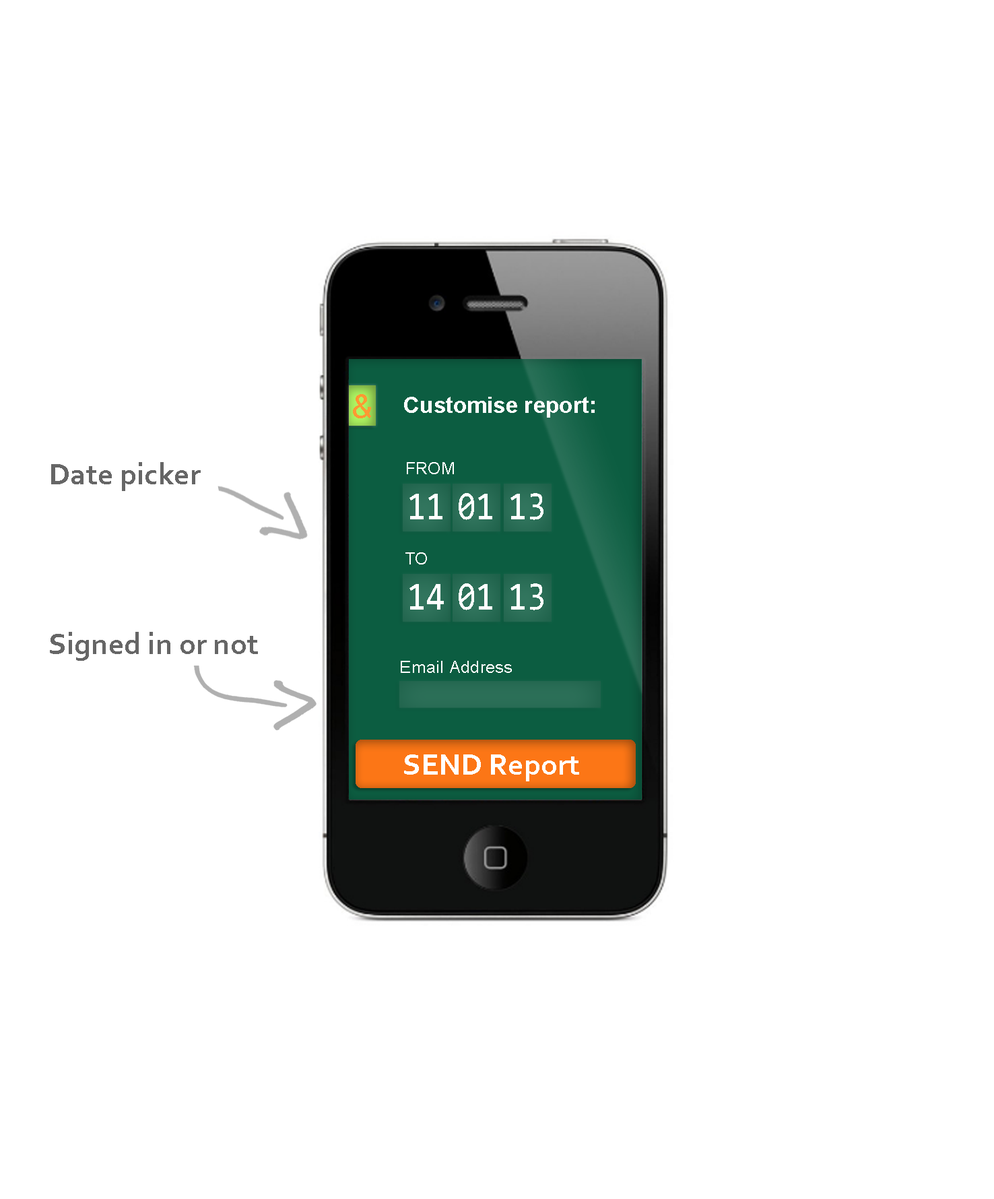
<style>
.page{position:relative;width:994px;height:1199px;background:#ffffff}
.page>*{position:absolute;margin:0}
.t1{font:30.9px "Mangal";color:#ff9933}
.t2{font:22.5px "Arial-BoldMT";letter-spacing:0.01em;color:#ffffff}
.t3{font:30.9px "Corbel-Bold";color:#666666}
.t4{font:16.8px "ArialMT";letter-spacing:0.01em;color:#ffffff}
.t5{font:40.4px "Consolas";color:#ffffff;scale:0.83 1}
.t6{font:30.9px "Corbel-Bold";color:#ffffff}
</style>
<div class="page">
<p class="t1" style="left:353px;top:394px;width:18px;height:24px">&amp;</p>
<p class="t2" style="left:404px;top:397px;width:191px;height:21px">Customise report:</p>
<p class="t3" style="left:51px;top:462px;width:150px;height:29px">Date picker</p>
<p class="t4" style="left:407px;top:462px;width:47px;height:12px">FROM</p>
<p class="t5" style="left:410px;top:494px;width:33px;height:25px">11</p>
<p class="t5" style="left:459px;top:493px;width:33px;height:27px">01</p>
<p class="t5" style="left:511px;top:493px;width:33px;height:27px">13</p>
<p class="t4" style="left:406px;top:552px;width:21px;height:13px">TO</p>
<p class="t5" style="left:410px;top:584px;width:34px;height:26px">14</p>
<p class="t5" style="left:459px;top:583px;width:33px;height:27px">01</p>
<p class="t5" style="left:511px;top:583px;width:33px;height:27px">13</p>
<p class="t3" style="left:50px;top:632px;width:208px;height:29px">Signed in or not</p>
<p class="t4" style="left:401px;top:661px;width:111px;height:12px">Email Address</p>
<p class="t6" style="left:404px;top:755px;width:175px;height:26px">SEND Report</p>
</div>
